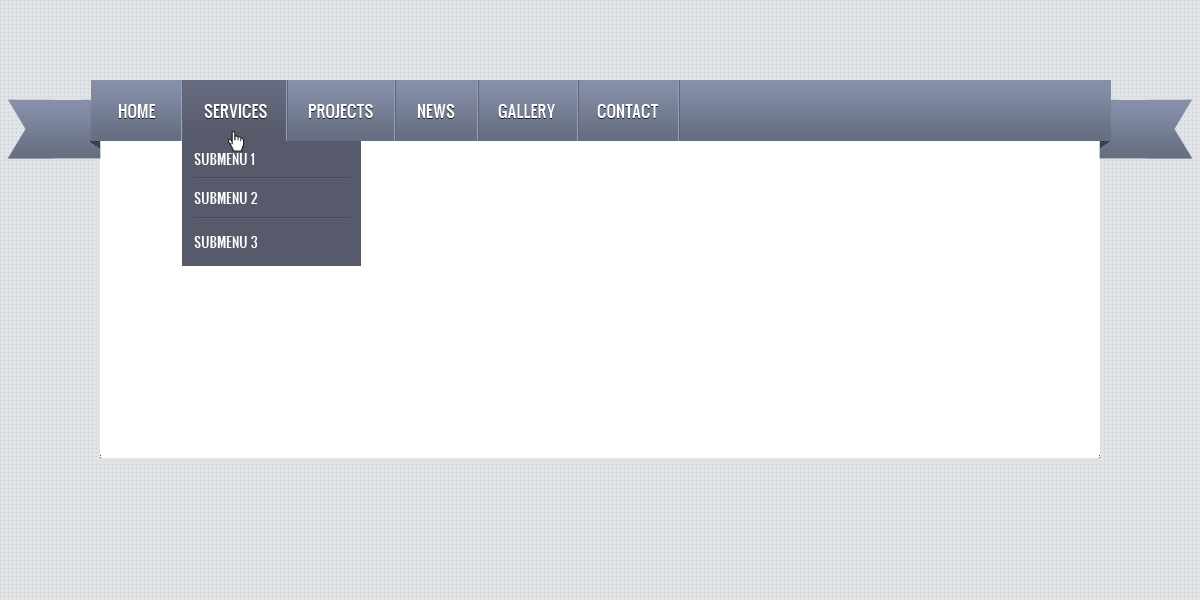
<style>
.page{position:relative;width:1200px;height:600px;background:#e3e3e3}
.page>*{position:absolute;margin:0}
.t1{font:16px "Oswald";color:#ffffff}
.t2{font:13px "Oswald";color:#ffffff}
</style>
<div class="page">
<p class="t1" style="left:118px;top:104px;width:38px;height:14px">HOME</p>
<p class="t1" style="left:204px;top:104px;width:63px;height:14px">SERVICES</p>
<p class="t1" style="left:308px;top:104px;width:65px;height:14px">PROJECTS</p>
<p class="t1" style="left:417px;top:104px;width:38px;height:14px">NEWS</p>
<p class="t1" style="left:498px;top:104px;width:57px;height:14px">GALLERY</p>
<p class="t1" style="left:597px;top:104px;width:62px;height:14px">CONTACT</p>
<p class="t2" style="left:194px;top:153px;width:61px;height:12px">SUBMENU 1</p>
<p class="t2" style="left:194px;top:192px;width:64px;height:12px">SUBMENU 2</p>
<p class="t2" style="left:194px;top:236px;width:64px;height:12px">SUBMENU 3</p>
</div>
